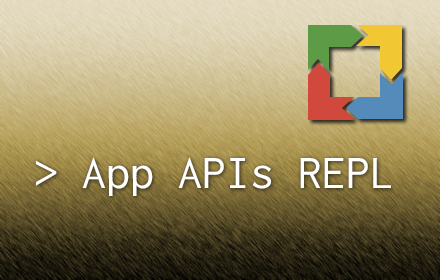
<style>
.page{position:relative;width:440px;height:280px}
.page>*{position:absolute;margin:0}
.t1{font:48px "Inconsolata";color:#ffffff}
</style>
<div class="page">
<p class="t1" style="left:35px;top:157px;width:356px;height:39px">&gt; App APIs REPL</p>
</div>
